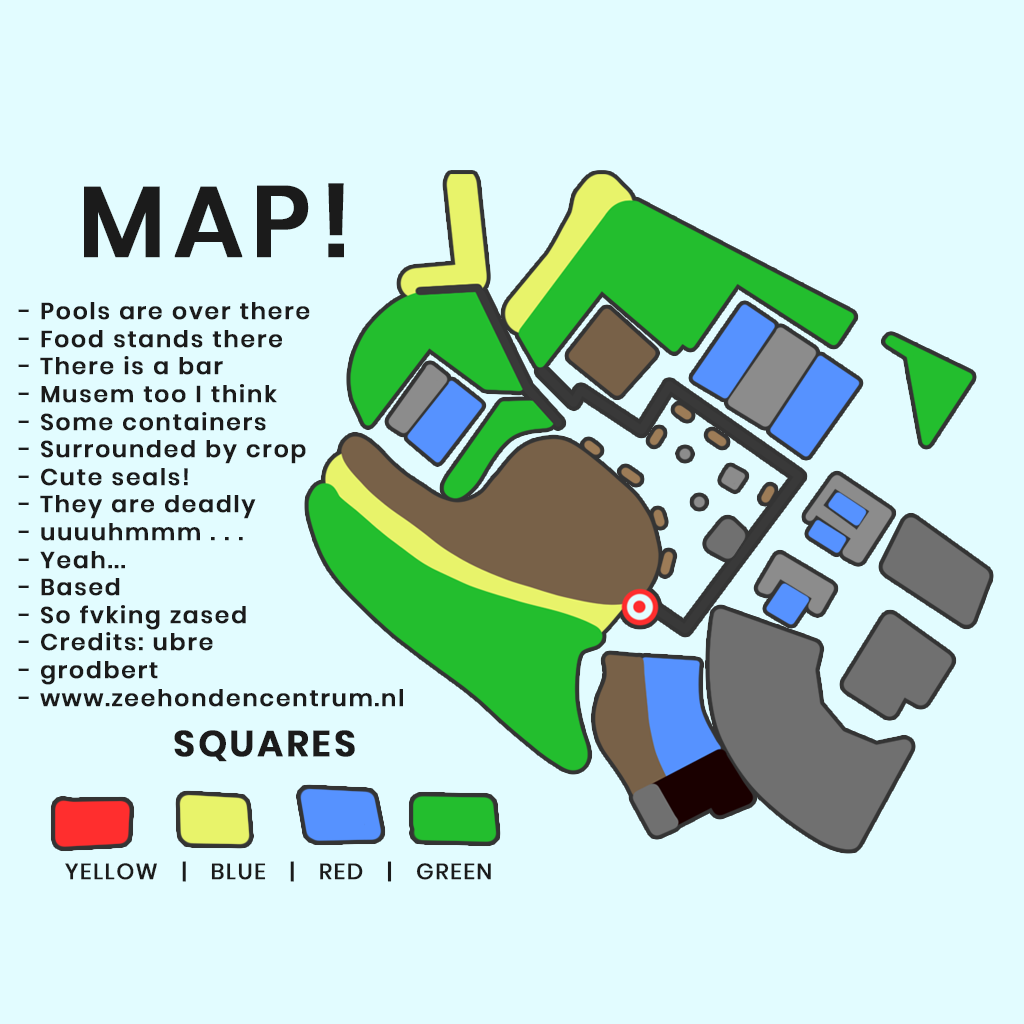
<style>
.page{position:relative;width:1024px;height:1024px;background:#e2fcff}
.page>*{position:absolute;margin:0}
.t1{font:100px "Poppins-Medium";letter-spacing:0.065em;color:#1b1b1b;font-weight:bold}
.t2{font:23px "Poppins-Medium";letter-spacing:0.065em;color:#1b1b1b;font-weight:bold}
.t3{font:36px "Poppins-SemiBold";letter-spacing:0.065em;color:#1b1b1b;font-weight:bold}
.t4{font:22px "Poppins-Regular";letter-spacing:0.065em;color:#1b1b1b;font-weight:bold}
</style>
<div class="page">
<p class="t1" style="left:84px;top:183px;width:260px;height:75px">MAP!</p>
<p class="t2" style="left:18px;top:302px;width:385px;height:405px">- Pools are over there<br>- Food stands there<br>- There is a bar<br>- Musem too I think<br>- Some containers<br>- Surrounded by crop<br>- Cute seals!<br>- They are deadly<br>- uuuuhmmm . . .<br>- Yeah...<br>- Based<br>- So fvking zased<br>- Credits: ubre<br>- grodbert<br>- www.zeehondencentrum.nl</p>
<p class="t3" style="left:174px;top:730px;width:181px;height:32px">SQUARES</p>
<p class="t4" style="left:65px;top:861px;width:426px;height:21px">YELLOW   |   BLUE   |   RED   |   GREEN</p>
</div>
